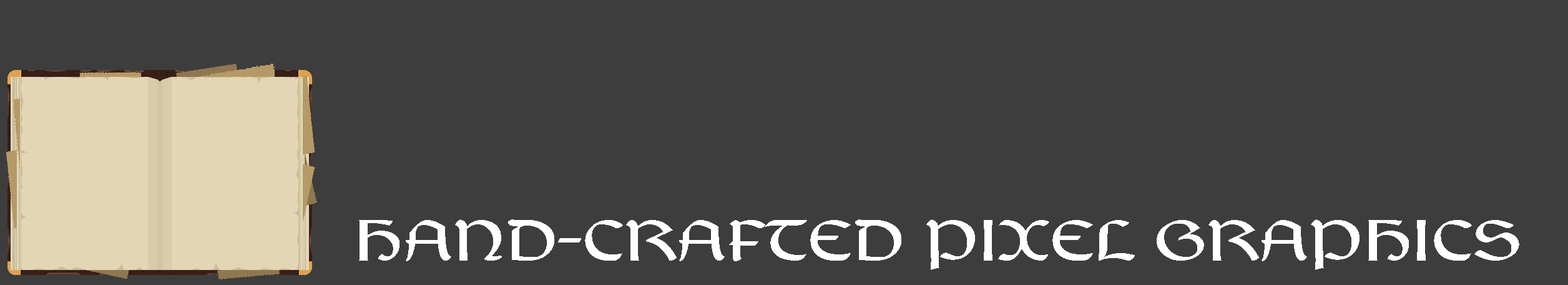
<style>
.page{position:relative;width:1568px;height:285px;background:#3d3d3d}
.page>*{position:absolute;margin:0}
.t1{font:59.2px "Balgruf";color:#ffffff;text-transform:uppercase;scale:1.21 1}
</style>
<div class="page">
<p class="t1" style="left:359px;top:219px;width:1160px;height:51px">Hand-crafted pixel graphics</p>
</div>
